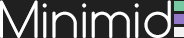
<style>
.page{position:relative;width:184px;height:38px;background:#202020}
.page>*{position:absolute;margin:0}
.t1{font:48px "Comfortaa-Light";color:#ffffff}
</style>
<div class="page">
<p class="t1" style="left:0px;top:0px;width:171px;height:38px">Minimid</p>
</div>
